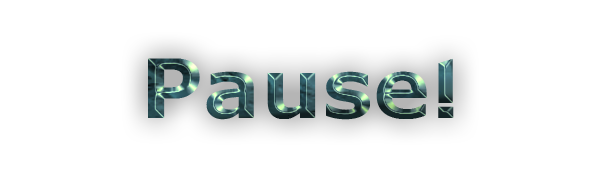
<style>
.page{position:relative;width:599px;height:193px;background:#ffffff}
.page>*{position:absolute;margin:0}
.t1{font:81.9px "Motken-noqta";scale:1.05 1}
</style>
<div class="page">
<p class="t1" style="left:148px;top:58px;width:306px;height:62px">!Pause</p>
</div>
